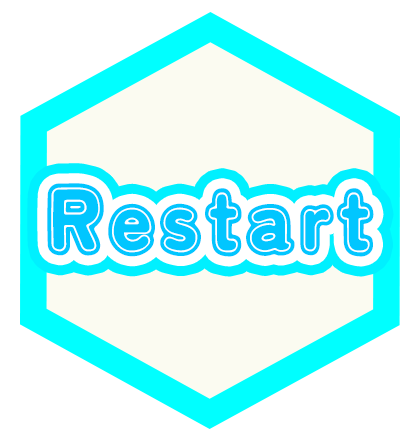
<style>
.page{position:relative;width:420px;height:440px;background:#ffffff}
.page>*{position:absolute;margin:0}
.t1{font:100px "DokiDokiFantasia";color:#01c6ff}
</style>
<div class="page">
<p class="t1" style="left:47px;top:183px;width:327px;height:74px">Restart</p>
</div>
